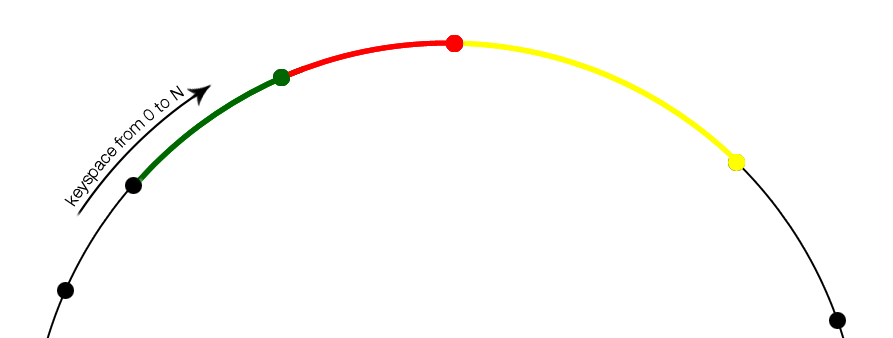
<style>
.page{position:relative;width:893px;height:338px;background:#ffffff}
.page>*{position:absolute;margin:0}
.t1{font:17px "HelveticaNeue-Light";color:#000000}
</style>
<div class="page">
<p class="t1" style="left:64px;top:85px;width:120px;height:122px;rotate:-45deg">keyspace from 0 to N</p>
</div>
